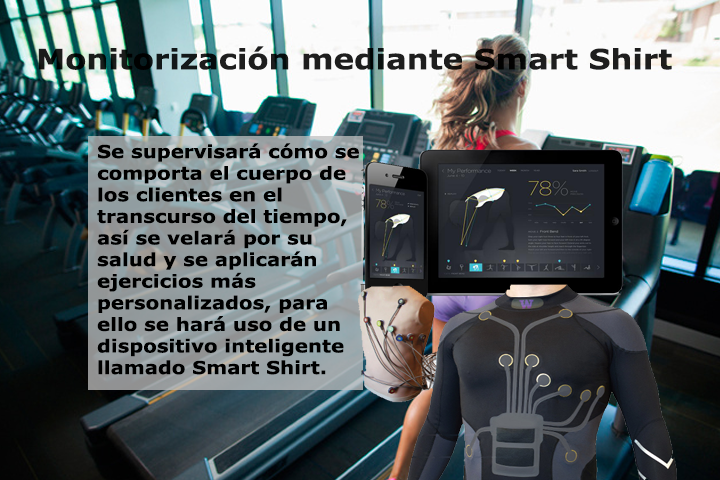
<style>
.page{position:relative;width:720px;height:480px}
.page>*{position:absolute;margin:0}
.t1{font:28px "Verdana-Bold";color:#1d1d1d;scale:1.1 1}
.t2{font:18px "Verdana-Bold";color:#000000;scale:1.1 1}
</style>
<div class="page">
<p class="t1" style="left:38px;top:46px;width:634px;height:24px">Monitorización mediante Smart Shirt</p>
<p class="t2" style="left:97px;top:143px;width:262px;height:232px">Se supervisará cómo se comporta el cuerpo de los clientes en el transcurso del tiempo, así se velará por su salud y se aplicarán ejercicios más personalizados, para ello se hará uso de un dispositivo inteligente llamado Smart Shirt.</p>
</div>
